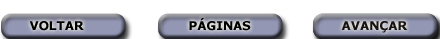
<style>
.page{position:relative;width:440px;height:39px;background:#ffffff}
.page>*{position:absolute;margin:0}
.t1{font:12px "Verdana-Bold";color:#010000}
.t2{font:12px "Verdana-Bold";color:#181313}
</style>
<div class="page">
<p class="t1" style="left:29px;top:21px;width:55px;height:10px">VOLTAR</p>
<p class="t1" style="left:189px;top:18px;width:62px;height:13px">PÁGINAS</p>
<p class="t2" style="left:341px;top:20px;width:67px;height:12px">AVANÇAR</p>
<p class="t2" style="left:341px;top:21px;width:67px;height:12px">AVANÇAR</p>
</div>
